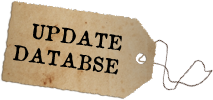
<style>
.page{position:relative;width:213px;height:100px;background:#ffffff}
.page>*{position:absolute;margin:0}
.t1{font:20px "OldNewspaperTypes";color:#000000}
</style>
<div class="page">
<p class="t1" style="left:13px;top:23px;width:109px;height:52px;text-align:right;rotate:8deg">UPDATE<br>DATABSE</p>
</div>
